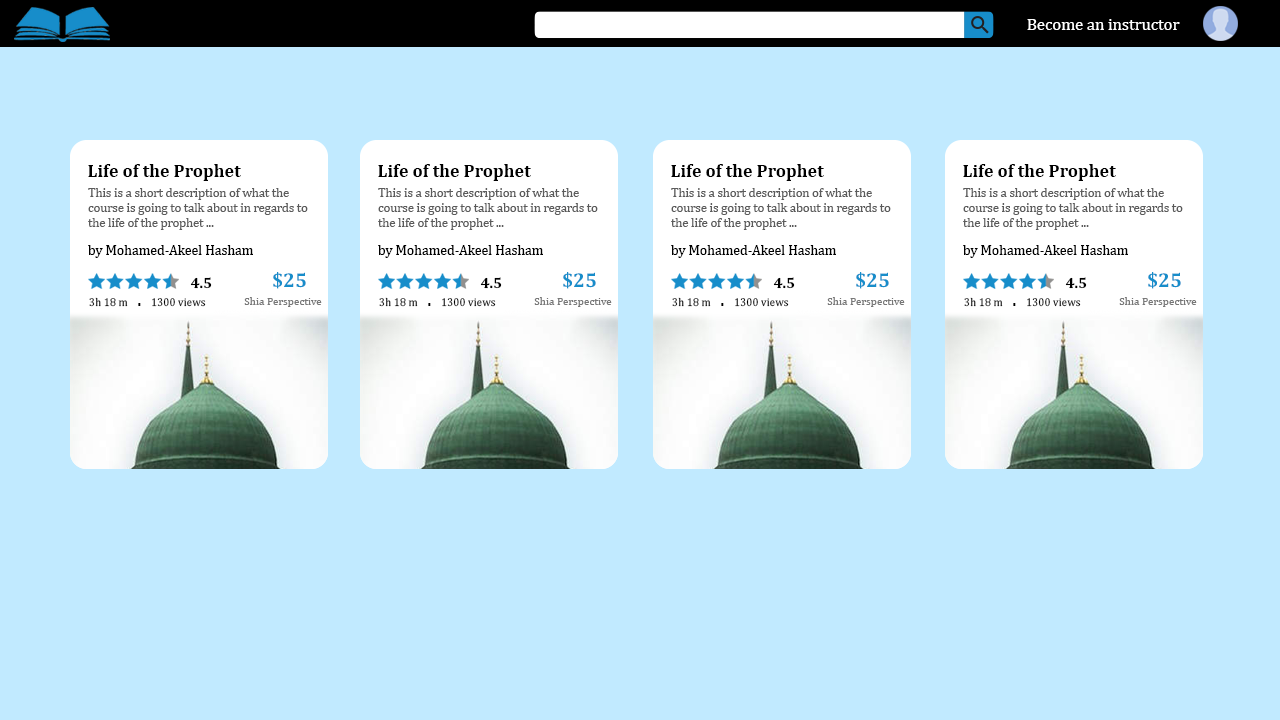
<style>
.page{position:relative;width:1280px;height:720px;background:#c1eaff}
.page>*{position:absolute;margin:0}
.t1{font:12px "Cambria";color:#ffffff}
.t2{font:18.1px "Cambria-Bold";color:#000000}
.t3{font:12.5px "Cambria";color:#5b5b5b}
.t4{font:13.9px "Cambria";color:#000000}
.t5{font:10.7px "Cambria-Bold";color:#000000}
.t6{font:14.6px "Cambria-Bold";color:#178dca}
.t7{font:11.5px "Cambria";color:#000000;scale:0.97 1}
.t8{font:16.7px "Cambria-Bold";color:#000000;scale:0.97 1}
.t9{font:11.1px "Cambria";color:#787878}
</style>
<div class="page">
<p class="t1" style="left:1027px;top:19px;width:153px;height:11px">Become an instructor</p>
<p class="t2" style="left:88px;top:164px;width:153px;height:17px">Life of the Prophet</p>
<p class="t2" style="left:378px;top:164px;width:153px;height:17px">Life of the Prophet</p>
<p class="t2" style="left:671px;top:164px;width:153px;height:17px">Life of the Prophet</p>
<p class="t2" style="left:963px;top:164px;width:153px;height:17px">Life of the Prophet</p>
<p class="t3" style="left:88px;top:188px;width:220px;height:42px">This is a short description of what the course is going to talk about in regards to the life of the prophet ...</p>
<p class="t3" style="left:378px;top:188px;width:220px;height:42px">This is a short description of what the course is going to talk about in regards to the life of the prophet ...</p>
<p class="t3" style="left:671px;top:188px;width:220px;height:42px">This is a short description of what the course is going to talk about in regards to the life of the prophet ...</p>
<p class="t3" style="left:963px;top:188px;width:220px;height:42px">This is a short description of what the course is going to talk about in regards to the life of the prophet ...</p>
<p class="t4" style="left:88px;top:245px;width:165px;height:13px">by Mohamed-Akeel Hasham</p>
<p class="t4" style="left:378px;top:245px;width:165px;height:13px">by Mohamed-Akeel Hasham</p>
<p class="t4" style="left:671px;top:245px;width:165px;height:13px">by Mohamed-Akeel Hasham</p>
<p class="t4" style="left:963px;top:245px;width:165px;height:13px">by Mohamed-Akeel Hasham</p>
<p class="t5" style="left:190px;top:277px;width:22px;height:12px">4.5</p>
<p class="t6" style="left:273px;top:272px;width:33px;height:17px">$25</p>
<p class="t5" style="left:480px;top:277px;width:22px;height:12px">4.5</p>
<p class="t6" style="left:563px;top:272px;width:33px;height:17px">$25</p>
<p class="t5" style="left:773px;top:277px;width:22px;height:12px">4.5</p>
<p class="t6" style="left:856px;top:272px;width:33px;height:17px">$25</p>
<p class="t5" style="left:1065px;top:277px;width:22px;height:12px">4.5</p>
<p class="t6" style="left:1148px;top:272px;width:33px;height:17px">$25</p>
<p class="t7" style="left:89px;top:297px;width:117px;height:10px">3h 18 m    <span class="t8">.</span>    1300 views</p>
<p class="t9" style="left:244px;top:297px;width:78px;height:10px">Shia Perspective</p>
<p class="t7" style="left:379px;top:297px;width:117px;height:10px">3h 18 m    <span class="t8">.</span>    1300 views</p>
<p class="t9" style="left:534px;top:297px;width:78px;height:10px">Shia Perspective</p>
<p class="t7" style="left:672px;top:297px;width:117px;height:10px">3h 18 m    <span class="t8">.</span>    1300 views</p>
<p class="t9" style="left:827px;top:297px;width:78px;height:10px">Shia Perspective</p>
<p class="t7" style="left:964px;top:297px;width:117px;height:10px">3h 18 m    <span class="t8">.</span>    1300 views</p>
<p class="t9" style="left:1119px;top:297px;width:78px;height:10px">Shia Perspective</p>
</div>
